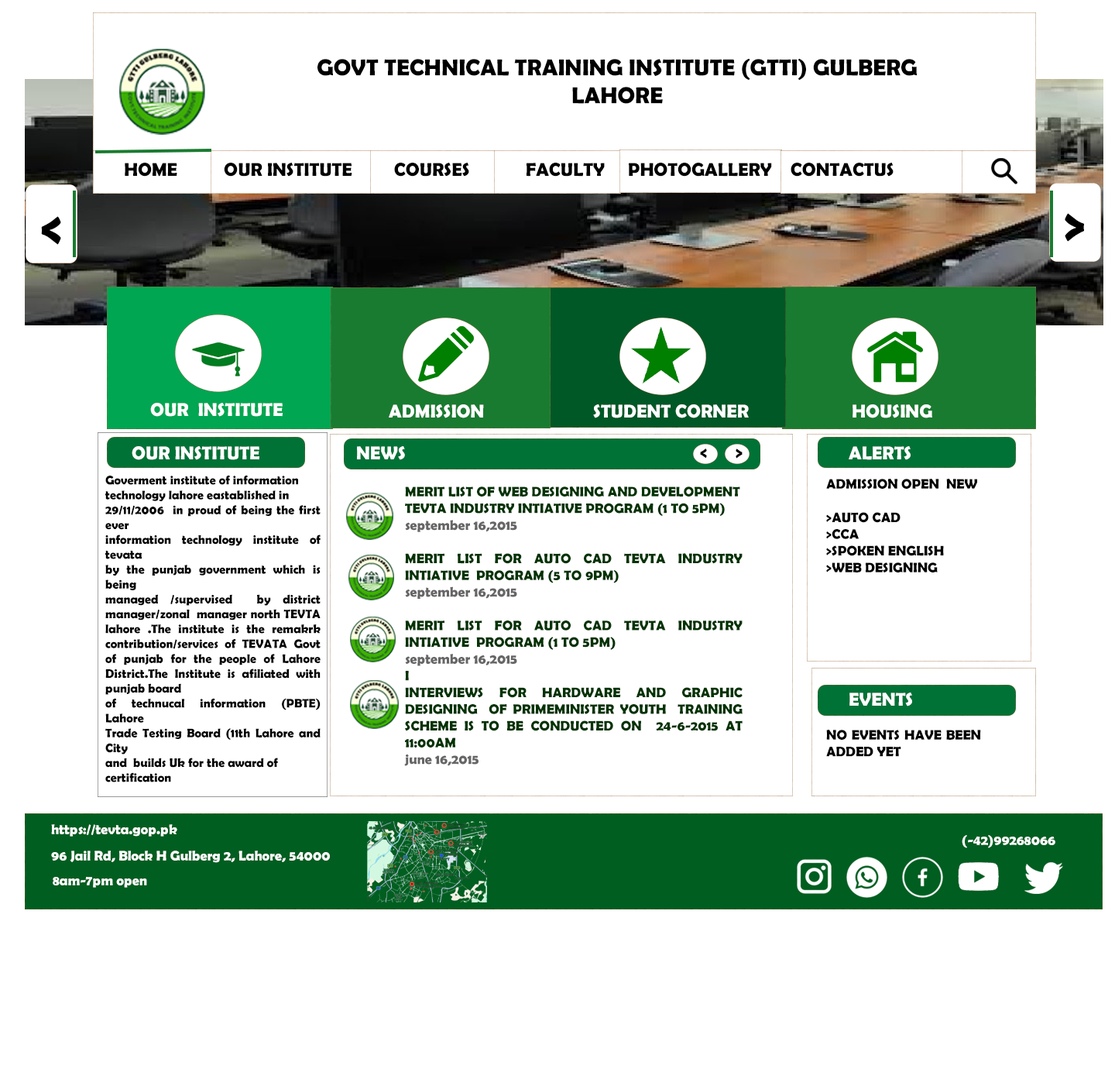
<style>
.page{position:relative;width:1115px;height:1069px;background:#ffffff}
.page>*{position:absolute;margin:0}
.t1{font:23.2px "BerlinSansFBDemi-Bold";color:#000000}
.t2{font:18.6px "BerlinSansFBDemi-Bold";color:#000000}
.t3{font:55.8px "BerlinSansFBDemi-Bold";color:#000000}
.t4{font:18.6px "BerlinSansFBDemi-Bold";color:#ffffff}
.t5{font:12.4px "BerlinSansFBDemi-Bold";color:#000000}
.t6{font:13.9px "BerlinSansFBDemi-Bold";color:#000000}
.t7{font:13.9px "BerlinSansFBDemi-Bold";color:#003300}
.t8{font:13.9px "BerlinSansFBDemi-Bold";color:#666666}
.t9{font:13.9px "BerlinSansFBDemi-Bold";color:#ffffff}
</style>
<div class="page">
<p class="t1" style="left:318px;top:58px;width:599px;height:46px;text-align:center">GOVT TECHNICAL TRAINING INSTITUTE (GTTI) GULBERG<br>LAHORE</p>
<p class="t2" style="left:125px;top:163px;width:769px;height:14px">HOME          OUR INSTITUTE         COURSES            FACULTY     PHOTOGALLERY    CONTACTUS</p>
<p class="t3" style="left:41px;top:216px;width:20px;height:29px">&lt;</p>
<p class="t3" style="left:1065px;top:213px;width:19px;height:29px">&gt;</p>
<p class="t4" style="left:150px;top:403px;width:133px;height:14px">OUR  INSTITUTE</p>
<p class="t4" style="left:389px;top:404px;width:95px;height:14px">ADMISSION</p>
<p class="t4" style="left:593px;top:404px;width:156px;height:14px">STUDENT CORNER</p>
<p class="t4" style="left:853px;top:404px;width:80px;height:14px">HOUSING</p>
<p class="t4" style="left:132px;top:446px;width:128px;height:14px">OUR INSTITUTE</p>
<p class="t4" style="left:357px;top:446px;width:48px;height:14px">NEWS</p>
<p class="t2" style="left:700px;top:449px;width:7px;height:10px">&lt;</p>
<p class="t2" style="left:736px;top:449px;width:7px;height:10px">&gt;</p>
<p class="t4" style="left:849px;top:446px;width:62px;height:14px">ALERTS</p>
<p class="t5" style="left:105px;top:475px;width:216px;height:307px;text-align:justify">Goverment institute of information<br>technology lahore eastablished in <br>29/11/2006  in proud of being the first ever<br>information technology institute of tevata<br>by the punjab government which is being <br>managed /supervised  by district manager/zonal  manager north TEVTA lahore .The institute is the remakrk contribution/services of TEVATA Govt of punjab for the people of Lahore  District.The Institute is afiliated with punjab board<br>of technucal information (PBTE) Lahore<br>Trade Testing Board (11th Lahore and City <br>and  builds Uk for the award of <br>certification</p>
<p class="t6" style="left:827px;top:479px;width:151px;height:93px;text-align:justify">ADMISSION OPEN  NEW<br><br>&gt;AUTO CAD<br>&gt;CCA<br>&gt;SPOKEN ENGLISH<br>&gt;WEB DESIGNING</p>
<p class="t7" style="left:404px;top:486px;width:339px;height:280px;text-align:justify">MERIT LIST OF WEB DESIGNING AND DEVELOPMENT<br>TEVTA INDUSTRY INTIATIVE PROGRAM (1 TO 5PM)<br><span class="t8">september 16,2015<br><br></span>MERIT LIST FOR AUTO CAD TEVTA INDUSTRY INTIATIVE  PROGRAM (5 TO 9PM)<br><span class="t8">september 16,2015<br><br></span>MERIT LIST FOR AUTO CAD TEVTA INDUSTRY INTIATIVE  PROGRAM (1 TO 5PM)<br><span class="t8">september 16,2015<br></span>I<br>INTERVIEWS FOR HARDWARE AND GRAPHIC DESIGNING  OF PRIMEMINISTER YOUTH  TRAINING SCHEME IS TO BE CONDUCTED ON  24-6-2015 AT 11:00AM <br><span class="t8">june 16,2015</span></p>
<p class="t4" style="left:850px;top:693px;width:63px;height:13px">EVENTS</p>
<p class="t6" style="left:827px;top:730px;width:154px;height:27px;text-align:justify">NO EVENTS HAVE BEEN ADDED YET</p>
<p class="t9" style="left:51px;top:824px;width:126px;height:13px">https://tevta.gop.pk</p>
<p class="t9" style="left:962px;top:835px;width:94px;height:13px">(-42)99268066</p>
<p class="t9" style="left:51px;top:851px;width:279px;height:12px">96 Jail Rd, Block H Gulberg 2, Lahore, 54000</p>
<p class="t9" style="left:53px;top:877px;width:94px;height:11px">8am-7pm open</p>
</div>
